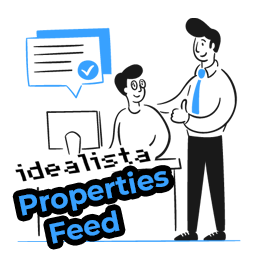
<style>
.page{position:relative;width:256px;height:256px;background:#ffffff}
.page>*{position:absolute;margin:0}
.t1{font:27.9px "Montserrat-Bold";color:#38a1ff}
</style>
<div class="page">
<p class="t1" style="left:18px;top:171px;width:151px;height:73px;rotate:-12deg">Properties<br>   Feed</p>
</div>
